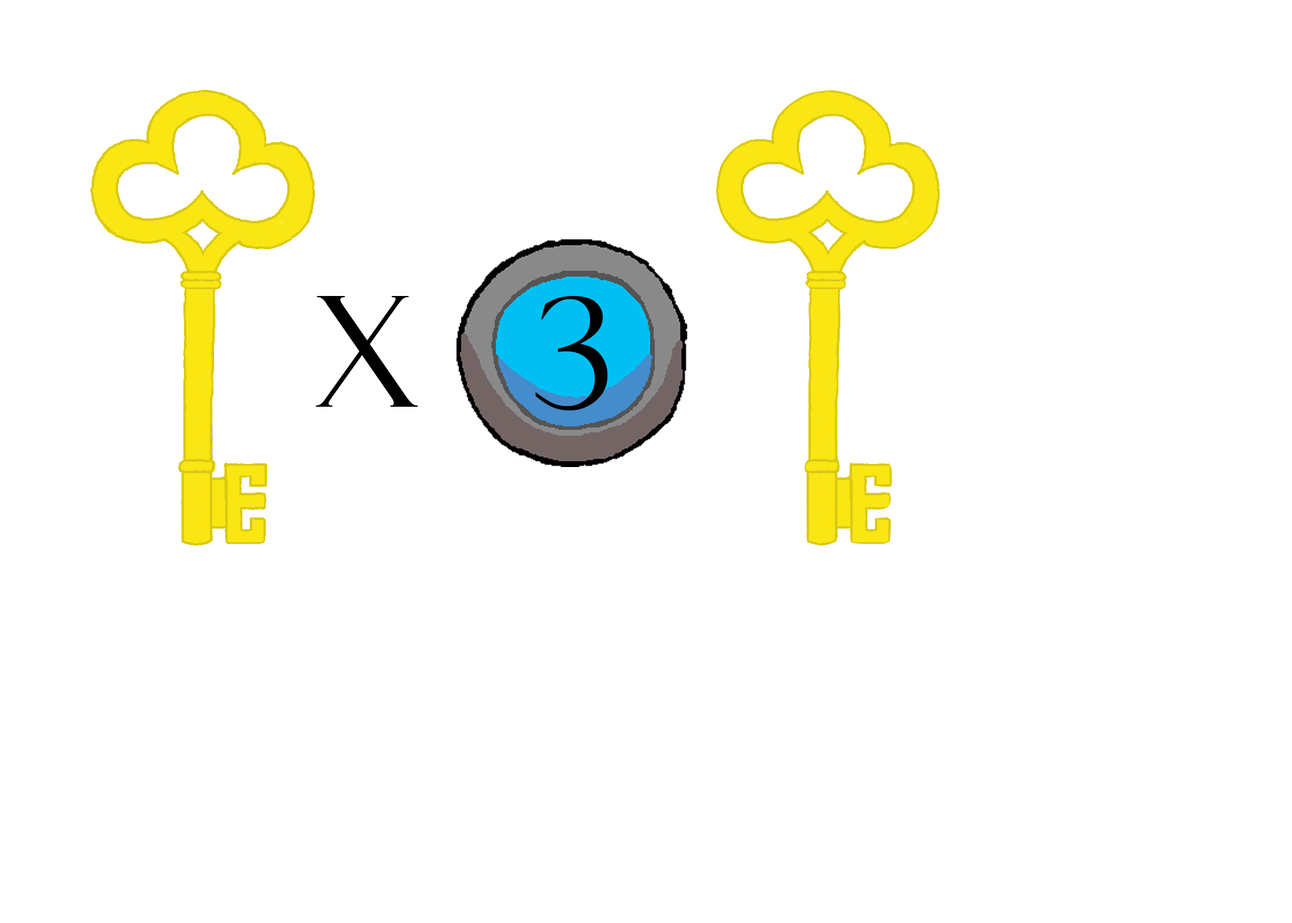
<style>
.page{position:relative;width:1292px;height:923px;background:#ffffff}
.page>*{position:absolute;margin:0}
.t1{font:153.8px "FelixTitlingMT";color:#000000}
</style>
<div class="page">
<p class="t1" style="left:316px;top:296px;width:102px;height:111px">x</p>
<p class="t1" style="left:535px;top:296px;width:73px;height:114px">3</p>
</div>
